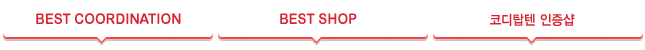
<style>
.page{position:relative;width:645px;height:50px;background:#ffffff}
.page>*{position:absolute;margin:0}
.t1{font:14.8px "ArialRoundedMTBold";color:#d52532;scale:0.91 1}
.t2{font:13.8px "YDIYGO340";color:#d52532;scale:0.91 1}
</style>
<div class="page">
<p class="t1" style="left:36px;top:13px;width:145px;height:11px">BEST COORDINATION</p>
<p class="t1" style="left:280px;top:13px;width:77px;height:11px">BEST SHOP</p>
<p class="t2" style="left:490px;top:13px;width:85px;height:13px">코디탑텐 인증샵</p>
</div>
